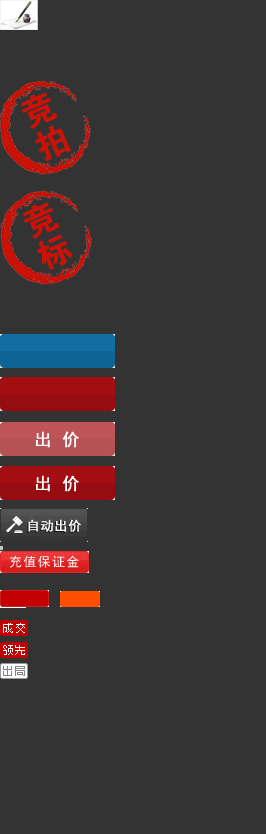
<style>
.page{position:relative;width:266px;height:834px;background:#333333}
.page>*{position:absolute;margin:0}
.t1{font:34.4px "FZDHTJW--GB1-0";letter-spacing:0.04em;color:#ca1206}
.t2{font:17px "SimHei";letter-spacing:0.04em;color:#ffffff;font-weight:bold}
.t3{font:13px "SimHei";letter-spacing:0.04em;color:#ffffff;font-weight:bold}
.t4{font:13px "SimHei";letter-spacing:0.1em;color:#ffffff}
</style>
<div class="page">
<p class="t1" style="left:20px;top:92px;width:51px;height:70px;rotate:-24deg">竞拍</p>
<p class="t1" style="left:22px;top:202px;width:51px;height:68px;rotate:-24deg">竞标</p>
<p class="t2" style="left:36px;top:431px;width:43px;height:17px">出 价</p>
<p class="t2" style="left:36px;top:475px;width:43px;height:17px">出 价</p>
<p class="t3" style="left:28px;top:519px;width:53px;height:13px">自动出价</p>
<p class="t4" style="left:10px;top:555px;width:69px;height:13px">充值保证金</p>
</div>
